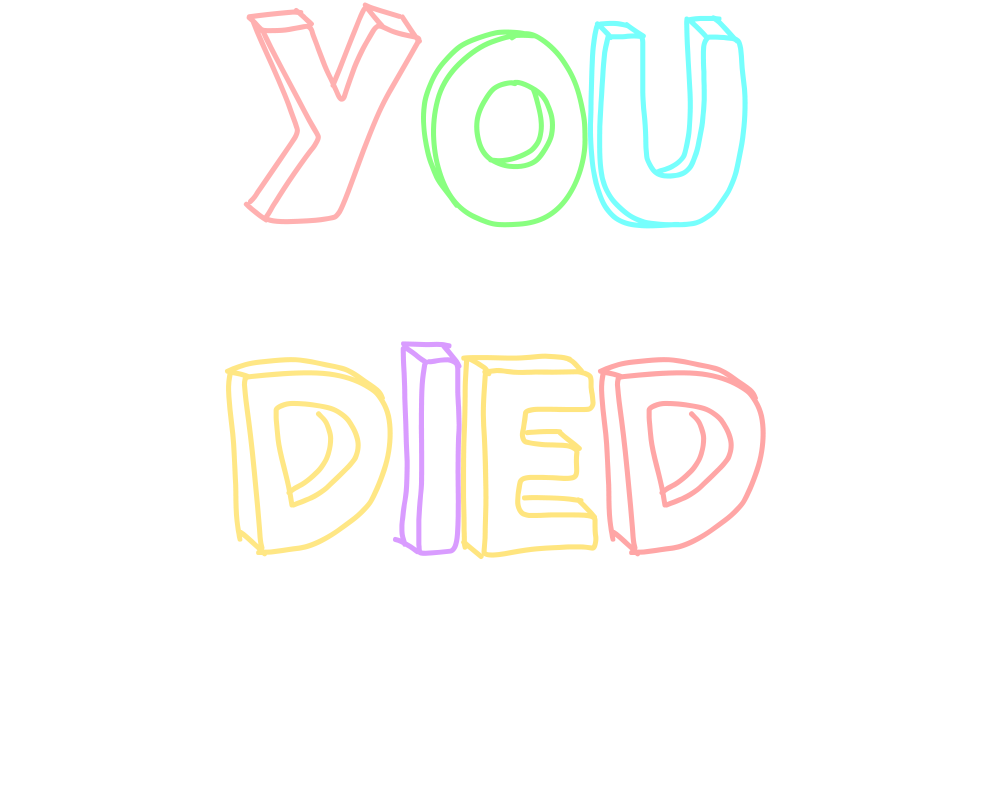
<style>
.page{position:relative;width:1000px;height:800px;background:#ffffff}
.page>*{position:absolute;margin:0}
.t1{font:277.8px "THE_MILLION_MILE_MAN";color:#ffb0b0}
.t2{font:277.8px "THE_MILLION_MILE_MAN";color:#89ff80}
.t3{font:277.8px "THE_MILLION_MILE_MAN";color:#76fffd}
.t4{font:277.8px "THE_MILLION_MILE_MAN";color:#ffe785}
.t5{font:277.8px "THE_MILLION_MILE_MAN";color:#d99cff}
.t6{font:277.8px "THE_MILLION_MILE_MAN";color:#ffe57f}
.t7{font:277.8px "THE_MILLION_MILE_MAN";color:#ffa6a6}
</style>
<div class="page">
<p class="t1" style="left:224px;top:2px;width:542px;height:558px;text-align:center">y<span class="t2">o</span><span class="t3">u<br></span><span class="t4">d</span><span class="t5">i</span><span class="t6">e</span><span class="t7">d</span></p>
</div>
